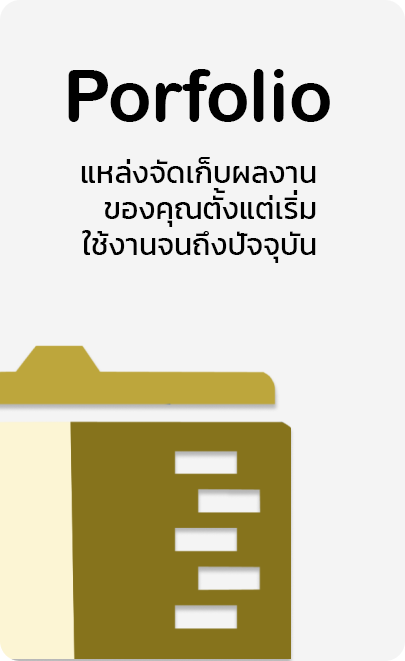
<style>
.page{position:relative;width:405px;height:661px;background:#f4f4f4}
.page>*{position:absolute;margin:0}
.t1{font:72px "ArialRoundedMTBold";color:#000000}
.t2{font:30px "Kanit-Regular";color:#000000}
</style>
<div class="page">
<p class="t1" style="left:68px;top:69px;width:262px;height:53px">Porfolio</p>
<p class="t2" style="left:81px;top:157px;width:235px;height:106px;text-align:right">แหล่งจัดเก็บผลงาน<br>ของคุณตังแต่เริม<br>ใช้งานจนถึงปัจจุบัน</p>
<p class="t2" style="left:213px;top:188px;width:12px;height:5px">้</p>
<p class="t2" style="left:293px;top:190px;width:5px;height:5px">่</p>
</div>
